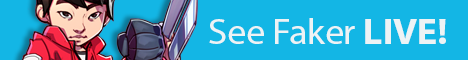
<style>
.page{position:relative;width:468px;height:60px;background:#13b6e5}
.page>*{position:absolute;margin:0}
.t1{font:36px "MyriadPro-Regular";letter-spacing:-0.01em;color:#edf3f5;scale:1.07 1}
.t2{font:36px "MyriadPro-Bold";letter-spacing:-0.01em;color:#edf3f5;scale:1.07 1}
</style>
<div class="page">
<p class="t1" style="left:209px;top:18px;width:237px;height:26px">See Faker <span class="t2">LIVE!</span></p>
</div>
